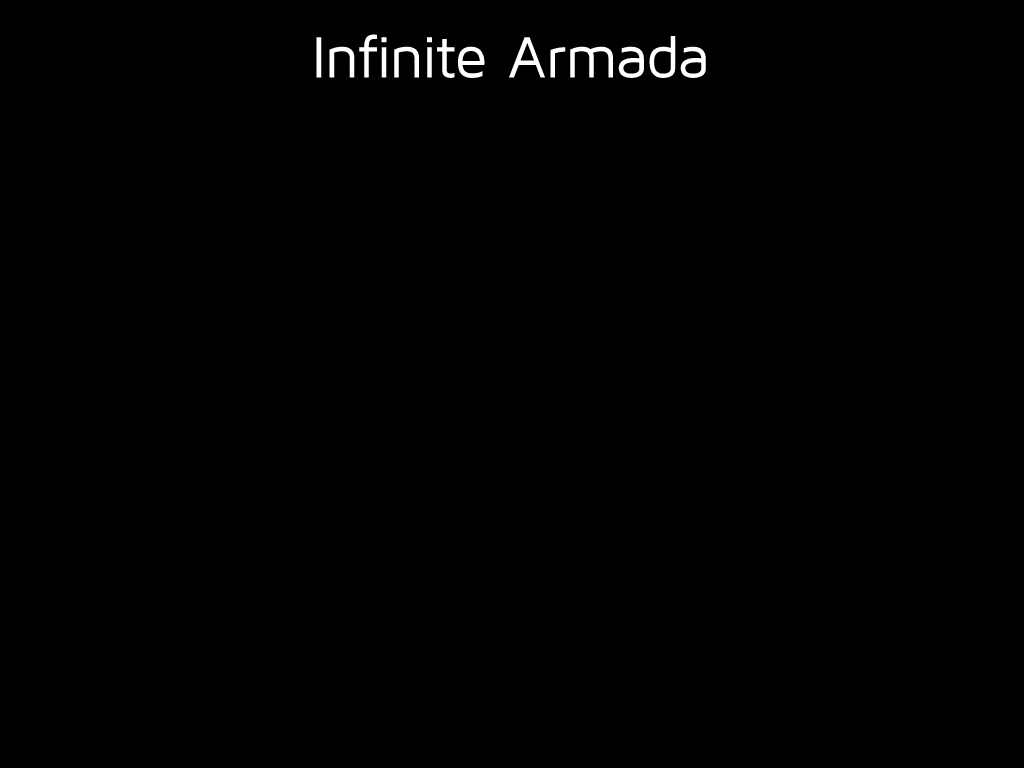
<style>
.page{position:relative;width:1024px;height:768px;background:#000000}
.page>*{position:absolute;margin:0}
.t1{font:60px "MavenPro";color:#ffffff}
</style>
<div class="page">
<p class="t1" style="left:316px;top:34px;width:390px;height:44px">Infinite Armada</p>
</div>
